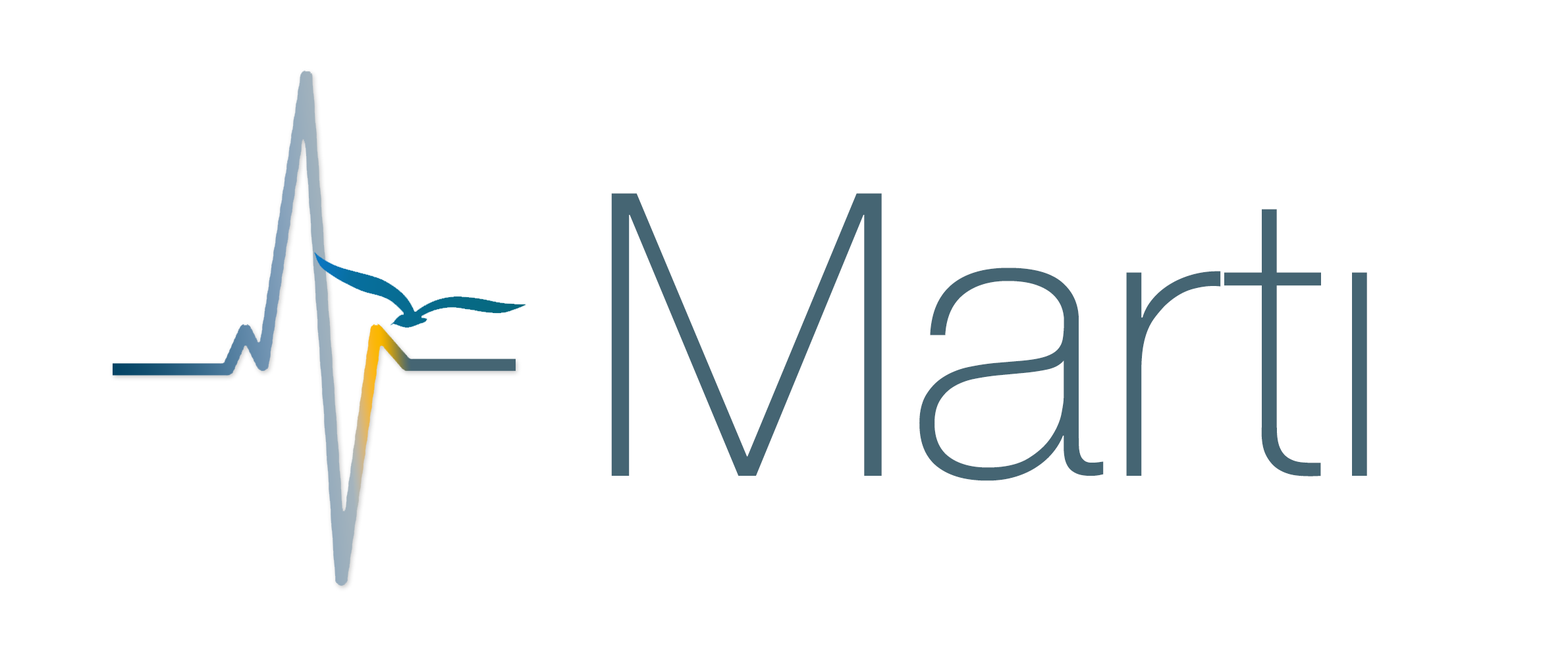
<style>
.page{position:relative;width:1568px;height:659px;background:#ffffff}
.page>*{position:absolute;margin:0}
.t1{font:395.1px "HelveticaNeue-Thin";color:#456573}
</style>
<div class="page">
<p class="t1" style="left:611px;top:193px;width:756px;height:288px">Martı</p>
</div>
